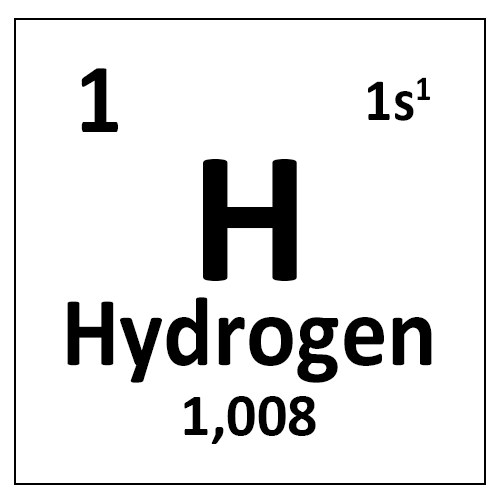
<style>
.page{position:relative;width:500px;height:500px;background:#ffffff}
.page>*{position:absolute;margin:0}
.t1{font:100px "Calibri-Bold";color:#000000;scale:0.93 1}
.t2{font:60px "Calibri-Bold";color:#000000;scale:0.93 1}
.t3{font:190px "Calibri-Bold";color:#000000}
.t4{font:60px "Calibri-Bold";color:#000000}
</style>
<div class="page">
<p class="t1" style="left:81px;top:68px;width:37px;height:64px">1</p>
<p class="t2" style="left:368px;top:77px;width:62px;height:44px">1s1</p>
<p class="t3" style="left:203px;top:159px;width:94px;height:122px">H</p>
<p class="t1" style="left:67px;top:297px;width:365px;height:86px">Hydrogen</p>
<p class="t4" style="left:184px;top:396px;width:132px;height:48px">1,008</p>
</div>
